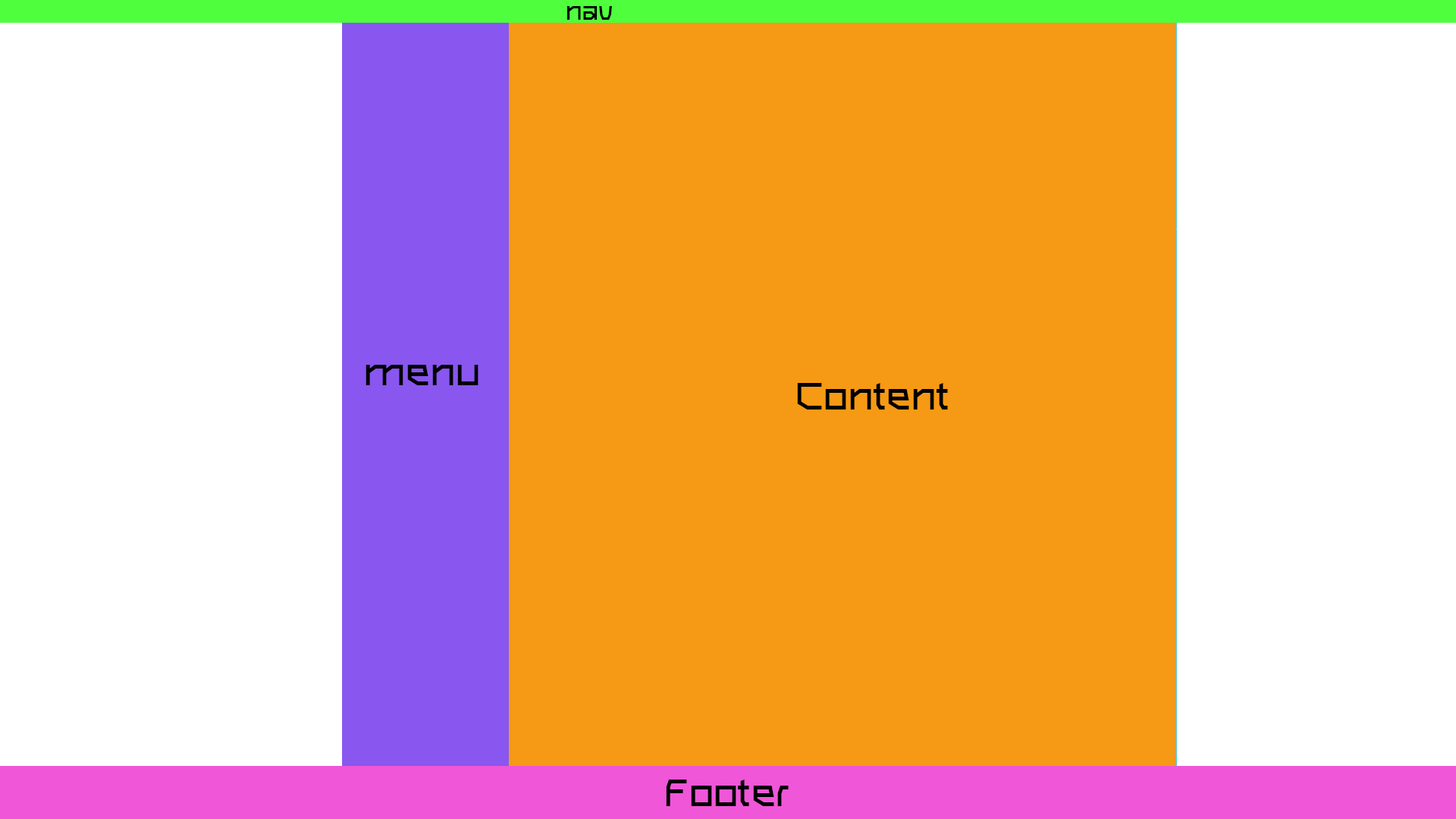
<style>
.page{position:relative;width:1456px;height:819px;background:#f69914}
.page>*{position:absolute;margin:0}
.t1{font:36.4px "TSTcheerthaiv.1";color:#000000}
.t2{font:54.6px "TSTcheerthaiv.1";color:#000000}
.t3{font:54.5px "TSTcheerthaiv.1";color:#000000}
</style>
<div class="page">
<p class="t1" style="left:566px;top:6px;width:46px;height:14px">nav</p>
<p class="t2" style="left:366px;top:365px;width:113px;height:20px">menu</p>
<p class="t2" style="left:797px;top:383px;width:151px;height:26px">Content</p>
<p class="t3" style="left:666px;top:780px;width:123px;height:26px">Footer</p>
</div>
